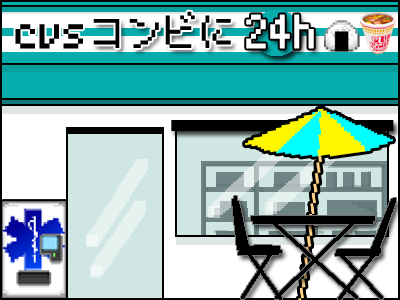
<style>
.page{position:relative;width:400px;height:300px;background:#ffffff}
.page>*{position:absolute;margin:0}
.t1{font:36px "PixelMplus10-Regular";color:#000000}
.t2{font:48px "PixelMplus10-Regular";color:#ffffff}
.t3{font:48px "PixelMplus10-Regular";color:#000000}
</style>
<div class="page">
<p class="t1" style="left:93px;top:11px;width:138px;height:37px">コンビに</p>
<p class="t2" style="left:246px;top:14px;width:68px;height:35px">24h</p>
<p class="t3" style="left:15px;top:24px;width:68px;height:25px">cvs</p>
</div>
